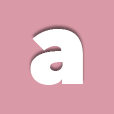
<style>
.page{position:relative;width:114px;height:114px;background:#d999a6}
.page>*{position:absolute;margin:0}
.t1{font:100px "AvenirNext-Heavy";color:#ffffff}
</style>
<div class="page">
<p class="t1" style="left:30px;top:29px;width:53px;height:56px">a</p>
</div>
